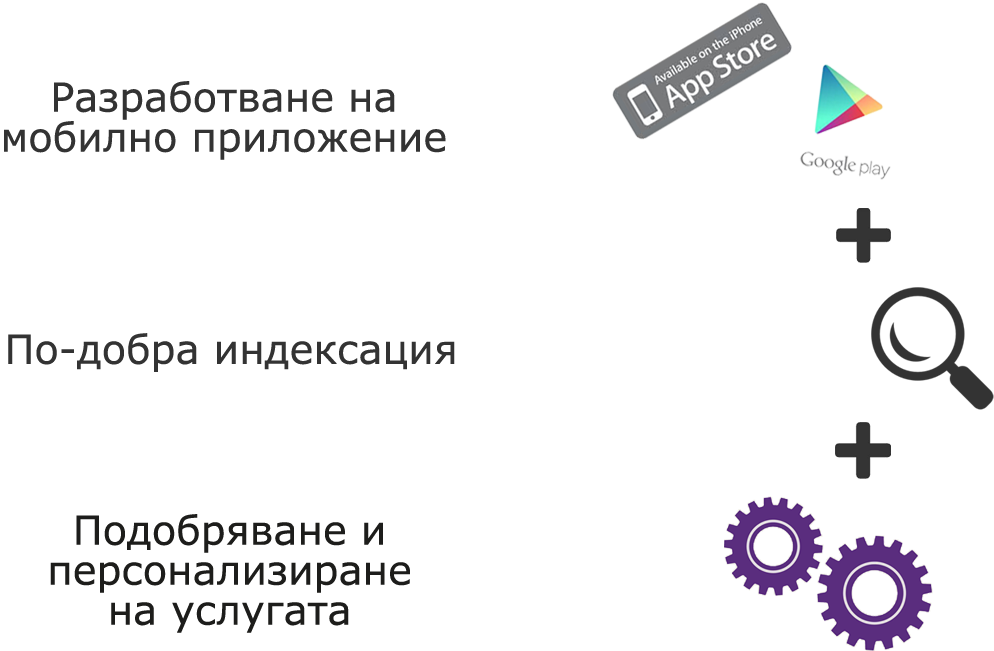
<style>
.page{position:relative;width:994px;height:651px;background:#ffffff}
.page>*{position:absolute;margin:0}
.t1{font:40px/40px "Verdana";color:#333333}
.t2{font:40px "Verdana";color:#333333}
.t3{font:40px/40px "Verdana";color:#1d1d1b}
</style>
<div class="page">
<p class="t1" style="left:4px;top:81px;width:442px;height:79px;text-align:center">Разработване на<br>мобилно приложение</p>
<p class="t2" style="left:8px;top:333px;width:447px;height:39px">По-добра индексация</p>
<p class="t3" style="left:50px;top:514px;width:360px;height:119px;text-align:center">Подобряване и<br>персонализиране<br>на услугата</p>
</div>
